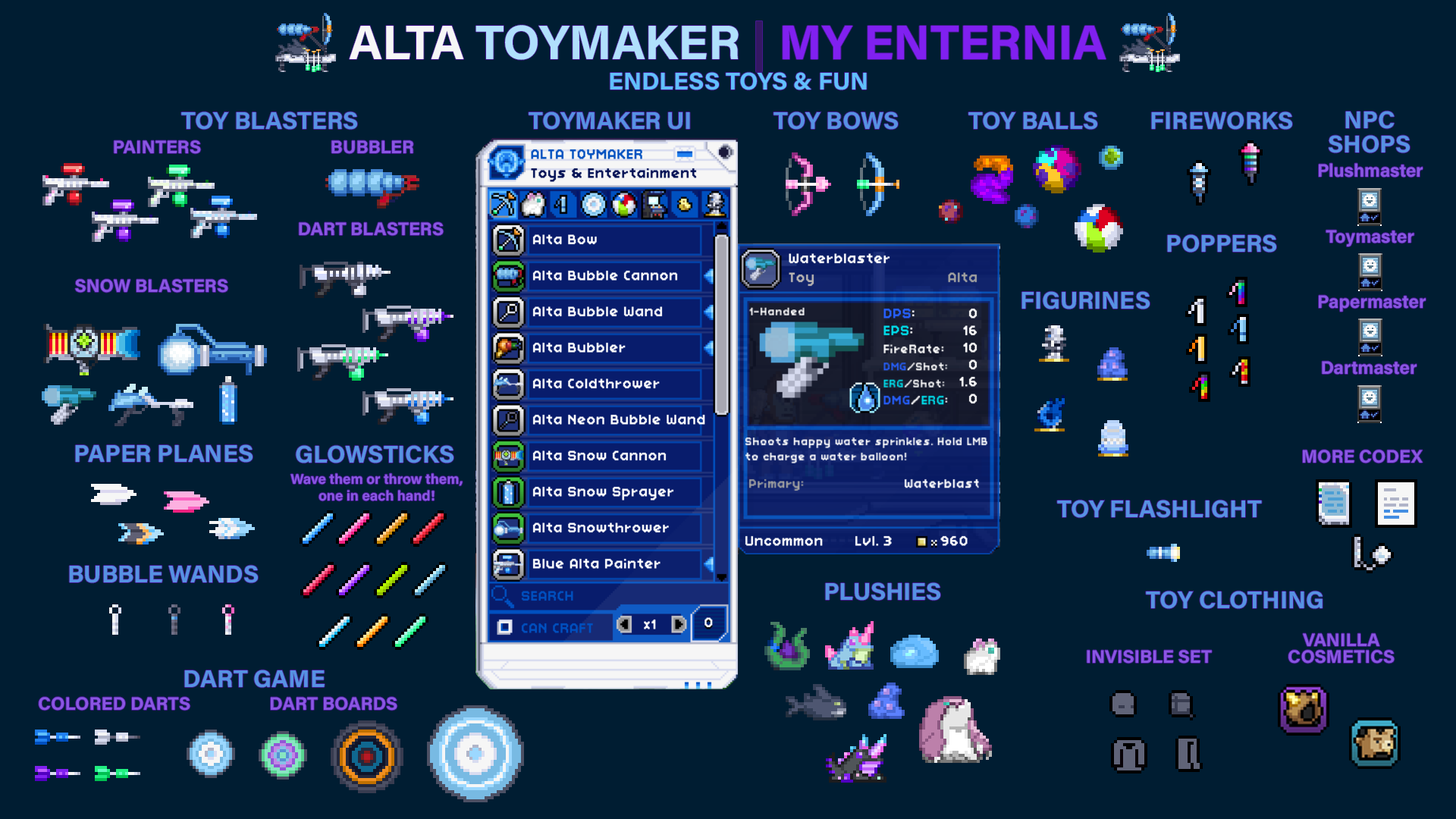
<style>
.page{position:relative;width:1456px;height:819px;background:#001d32}
.page>*{position:absolute;margin:0}
.t1{font:48.5px "AcuminConcept-Bold";color:#8020f0}
.t2{font:48.5px "AcuminConcept-Bold";color:#f6f6f6}
.t3{font:48.5px "AcuminConcept-Bold";color:#b0e0fc}
.t4{font:48.5px "AcuminConcept-Bold";color:#341863}
.t5{font:24.3px "AcuminConcept-Bold";color:#60c0fc}
.t6{font:24.3px "AcuminConcept-Bold";color:#5692e3}
.t7{font:24.3px/24.3px "AcuminConcept-Bold";color:#5692e3}
.t8{font:18.2px "AcuminConcept-Bold";color:#8a56e3}
.t9{font:14.2px/16.2px "AcuminConcept-Bold";color:#8a56e3}
.t10{font:18.2px/16.2px "AcuminConcept-Bold";color:#8a56e3}
</style>
<div class="page">
<p class="t1" style="left:349px;top:21px;width:757px;height:51px"><span class="t2">ALTA </span><span class="t3">TOYMAKER </span><span class="t4">| </span>MY ENTERNIA</p>
<p class="t5" style="left:610px;top:72px;width:257px;height:18px">ENDLESS TOYS &amp; FUN</p>
<p class="t6" style="left:181px;top:111px;width:176px;height:19px">TOY BLASTERS</p>
<p class="t6" style="left:529px;top:111px;width:161px;height:19px">TOYMAKER UI</p>
<p class="t6" style="left:773px;top:111px;width:125px;height:19px">TOY BOWS</p>
<p class="t6" style="left:968px;top:111px;width:129px;height:19px">TOY BALLS</p>
<p class="t6" style="left:1151px;top:111px;width:141px;height:19px">FIREWORKS</p>
<p class="t7" style="left:1329px;top:111px;width:81px;height:42px;text-align:center">NPC<br>SHOPS</p>
<p class="t8" style="left:114px;top:140px;width:87px;height:14px">PAINTERS</p>
<p class="t8" style="left:331px;top:140px;width:82px;height:14px">BUBBLER</p>
<p class="t8" style="left:1319px;top:163px;width:104px;height:14px">Plushmaster</p>
<p class="t8" style="left:299px;top:222px;width:145px;height:14px">DART BLASTERS</p>
<p class="t8" style="left:1326px;top:230px;width:88px;height:16px">Toymaster</p>
<p class="t6" style="left:1167px;top:234px;width:109px;height:19px">POPPERS</p>
<p class="t8" style="left:75px;top:279px;width:153px;height:14px">SNOW BLASTERS</p>
<p class="t6" style="left:1021px;top:291px;width:129px;height:18px">FIGURINES</p>
<p class="t8" style="left:1319px;top:295px;width:107px;height:17px">Papermaster</p>
<p class="t8" style="left:1322px;top:361px;width:95px;height:14px">Dartmaster</p>
<p class="t6" style="left:75px;top:444px;width:178px;height:19px">PAPER PLANES</p>
<p class="t6" style="left:296px;top:445px;width:157px;height:18px">GLOWSTICKS</p>
<p class="t8" style="left:1303px;top:450px;width:120px;height:13px">MORE CODEX</p>
<p class="t9" style="left:290px;top:473px;width:173px;height:28px;text-align:center">Wave them or throw them,<br>one in each hand!</p>
<p class="t6" style="left:1057px;top:500px;width:205px;height:18px">TOY FLASHLIGHT</p>
<p class="t6" style="left:69px;top:565px;width:189px;height:18px">BUBBLE WANDS</p>
<p class="t6" style="left:825px;top:582px;width:115px;height:19px">PLUSHIES</p>
<p class="t6" style="left:1146px;top:591px;width:177px;height:18px">TOY CLOTHING</p>
<p class="t10" style="left:1288px;top:633px;width:107px;height:31px;text-align:center">VANILLA<br>COSMETICS</p>
<p class="t8" style="left:1087px;top:650px;width:125px;height:14px">INVISIBLE SET</p>
<p class="t6" style="left:184px;top:670px;width:141px;height:18px">DART GAME</p>
<p class="t8" style="left:39px;top:697px;width:151px;height:14px">COLORED DARTS</p>
<p class="t8" style="left:271px;top:697px;width:126px;height:14px">DART BOARDS</p>
</div>
